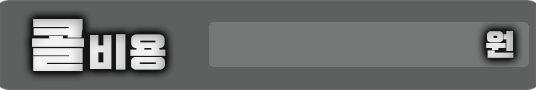
<style>
.page{position:relative;width:536px;height:90px;background:#5e605f}
.page>*{position:absolute;margin:0}
.t1{font:39.7px "Typo_SsangmunDong_B";color:#e4e4e4}
.t2{font:59.6px "Typo_SsangmunDong_B";color:#e4e4e4}
.t3{font:30px "Typo_SsangmunDong_B";color:#d5d5d5}
</style>
<div class="page">
<p class="t1" style="left:32px;top:19px;width:134px;height:52px"><span class="t2">콜</span>비용</p>
<p class="t3" style="left:486px;top:31px;width:28px;height:27px">원</p>
</div>
